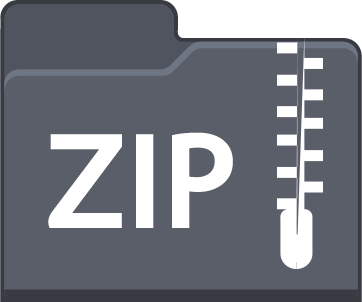
<style>
.page{position:relative;width:362px;height:302px;background:#5a5e69}
.page>*{position:absolute;margin:0}
.t1{font:137px "CorisandeBold";letter-spacing:-0.01em;color:#ffffff}
</style>
<div class="page">
<p class="t1" style="left:48px;top:132px;width:185px;height:96px">ZIP</p>
</div>
